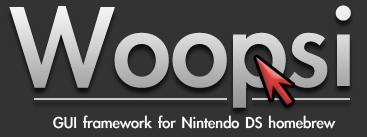
<style>
.page{position:relative;width:367px;height:137px;background:#333333}
.page>*{position:absolute;margin:0}
.t1{font:130px "LiGothicMed"}
.t2{font:18px "LiGothicMed";color:#ffffff}
</style>
<div class="page">
<p class="t1" style="left:9px;top:5px;width:342px;height:103px">Woopsi</p>
<p class="t2" style="left:53px;top:115px;width:283px;height:14px">GUI framework for Nintendo DS homebrew</p>
</div>
